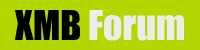
<style>
.page{position:relative;width:200px;height:50px;background:#b4d700}
.page>*{position:absolute;margin:0}
.t1{font:38px "Impact";color:#ececec}
.t2{font:38px "Impact";color:#000000}
</style>
<div class="page">
<p class="t1" style="left:15px;top:10px;width:169px;height:31px"><span class="t2">XMB</span> Forum</p>
</div>
